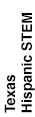
<style>
.page{position:relative;width:35px;height:117px;background:#ffffff}
.page>*{position:absolute;margin:0}
.t1{font:14px "Helvetica-Bold";color:#000000}
</style>
<div class="page">
<p class="t1" style="left:4px;top:13px;width:31px;height:100px;rotate:-90deg">Texas<br>Hispanic STEM</p>
</div>
